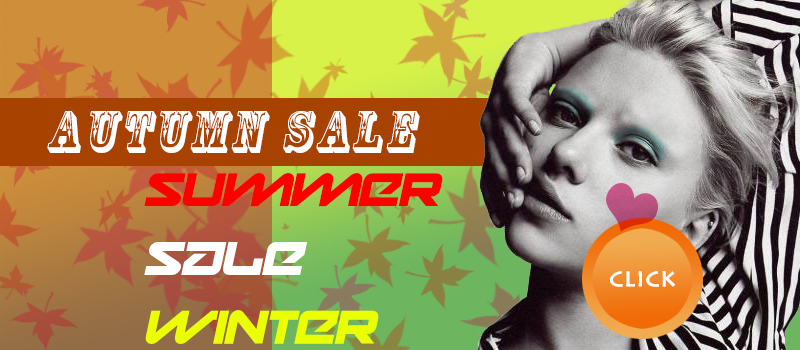
<style>
.page{position:relative;width:800px;height:350px}
.page>*{position:absolute;margin:0}
.t1{font:55.7px "RosewoodStd-Regular";letter-spacing:0.075em;color:#ffffff;font-style:italic}
.t2{font:45.8px/68.8px "Onky-Italic";color:#ff0000}
.t3{font:45.8px/68.8px "Onky-Italic";color:#ffffff}
.t4{font:45.8px/68.8px "Onky-Italic";color:#eaff00}
.t5{font:24px "LithosPro-Regular";color:#ffffff;font-weight:bold}
</style>
<div class="page">
<p class="t1" style="left:47px;top:111px;width:373px;height:42px">Autumn Sale</p>
<p class="t2" style="left:144px;top:173px;width:299px;height:171px">Summer<br><span class="t3">Sale<br></span><span class="t4">Winter</span></p>
<p class="t5" style="left:610px;top:270px;width:65px;height:17px">click</p>
</div>
